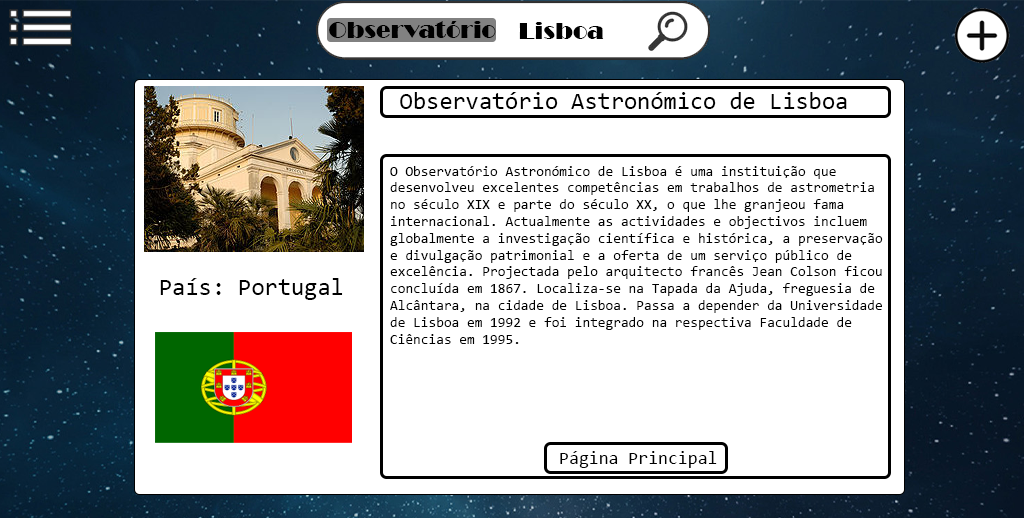
<style>
.page{position:relative;width:1024px;height:518px;background:#ffffff}
.page>*{position:absolute;margin:0}
.t1{font:24px "Broadway";color:#000000}
.t2{font:24px "Consolas";color:#000000}
.t3{font:14px "Consolas";color:#000000}
.t4{font:18px "Consolas";color:#000000}
</style>
<div class="page">
<p class="t1" style="left:329px;top:21px;width:167px;height:17px">Observatório</p>
<p class="t1" style="left:519px;top:22px;width:85px;height:17px">Lisboa</p>
<p class="t2" style="left:400px;top:92px;width:447px;height:17px">Observatório Astronómico de Lisboa</p>
<p class="t3" style="left:390px;top:166px;width:493px;height:178px">O Observatório Astronómico de Lisboa é uma instituição que <br>desenvolveu excelentes competências em trabalhos de astrometria <br>no século XIX e parte do século XX, o que lhe granjeou fama <br>internacional. Actualmente as actividades e objectivos incluem <br>globalmente a investigação científica e histórica, a preservação <br>e divulgação patrimonial e a oferta de um serviço público de <br>excelência. Projectada pelo arquitecto francês Jean Colson ficou <br>concluída em 1867. Localiza-se na Tapada da Ajuda, freguesia de <br>Alcântara, na cidade de Lisboa. Passa a depender da Universidade <br>de Lisboa em 1992 e foi integrado na respectiva Faculdade de <br>Ciências em 1995.</p>
<p class="t2" style="left:160px;top:278px;width:183px;height:22px">País: Portugal</p>
<p class="t4" style="left:560px;top:451px;width:157px;height:17px">Página Principal</p>
</div>
